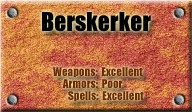
<style>
.page{position:relative;width:192px;height:112px}
.page>*{position:absolute;margin:0}
.t1{font:24px "Impact";color:#000000}
.t2{font:11px "Impact";color:#6f2b00}
</style>
<div class="page">
<p class="t1" style="left:42px;top:12px;width:109px;height:20px">Berskerker</p>
<p class="t2" style="left:53px;top:67px;width:90px;height:10px">Weapons:  Excellent</p>
<p class="t2" style="left:62px;top:79px;width:61px;height:9px">Armors:  Poor</p>
<p class="t2" style="left:68px;top:91px;width:76px;height:10px">Spells:  Excellent</p>
</div>
